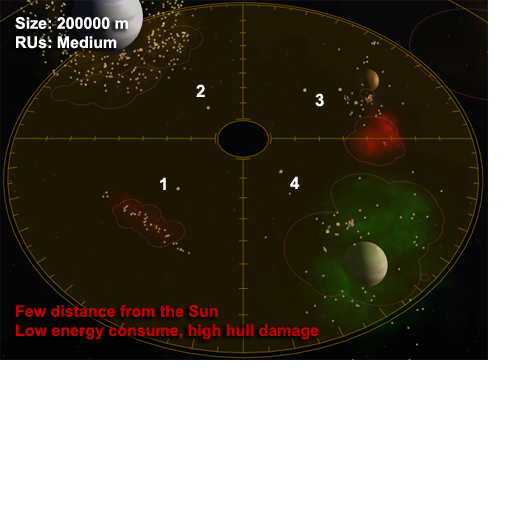
<style>
.page{position:relative;width:512px;height:512px;background:#ffffff}
.page>*{position:absolute;margin:0}
.t1{font:16px "Arial-BoldMT";color:#be0000}
.t2{font:16px "Arial-BoldMT";color:#ffffff}
.t3{font:17px "Arial-BoldMT";color:#ffffff}
</style>
<div class="page">
<p class="t1" style="left:15px;top:17px;width:304px;height:323px"><span class="t2">Size: 200000 m<br>RUs: Medium<br><br><br><br><br><br><br><br><br><br><br><br><br><br></span>Few distance from the Sun<br>Low energy consume, high hull damage</p>
<p class="t3" style="left:196px;top:84px;width:9px;height:13px">2</p>
<p class="t3" style="left:315px;top:93px;width:9px;height:14px">3</p>
<p class="t3" style="left:160px;top:177px;width:6px;height:13px">1</p>
<p class="t3" style="left:290px;top:176px;width:10px;height:13px">4</p>
</div>
